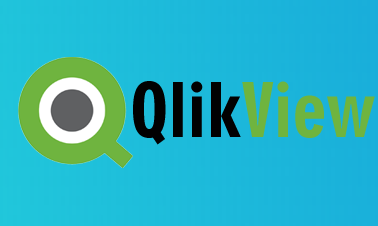
<style>
.page{position:relative;width:378px;height:226px}
.page>*{position:absolute;margin:0}
.t1{font:72px "Geometric706BT-BlackCondensedB";color:#010101}
.t2{font:72px "Geometric706BT-BlackCondensedB";color:#6fb43f}
</style>
<div class="page">
<p class="t1" style="left:133px;top:81px;width:242px;height:64px">Qlik<span class="t2">View</span></p>
</div>
